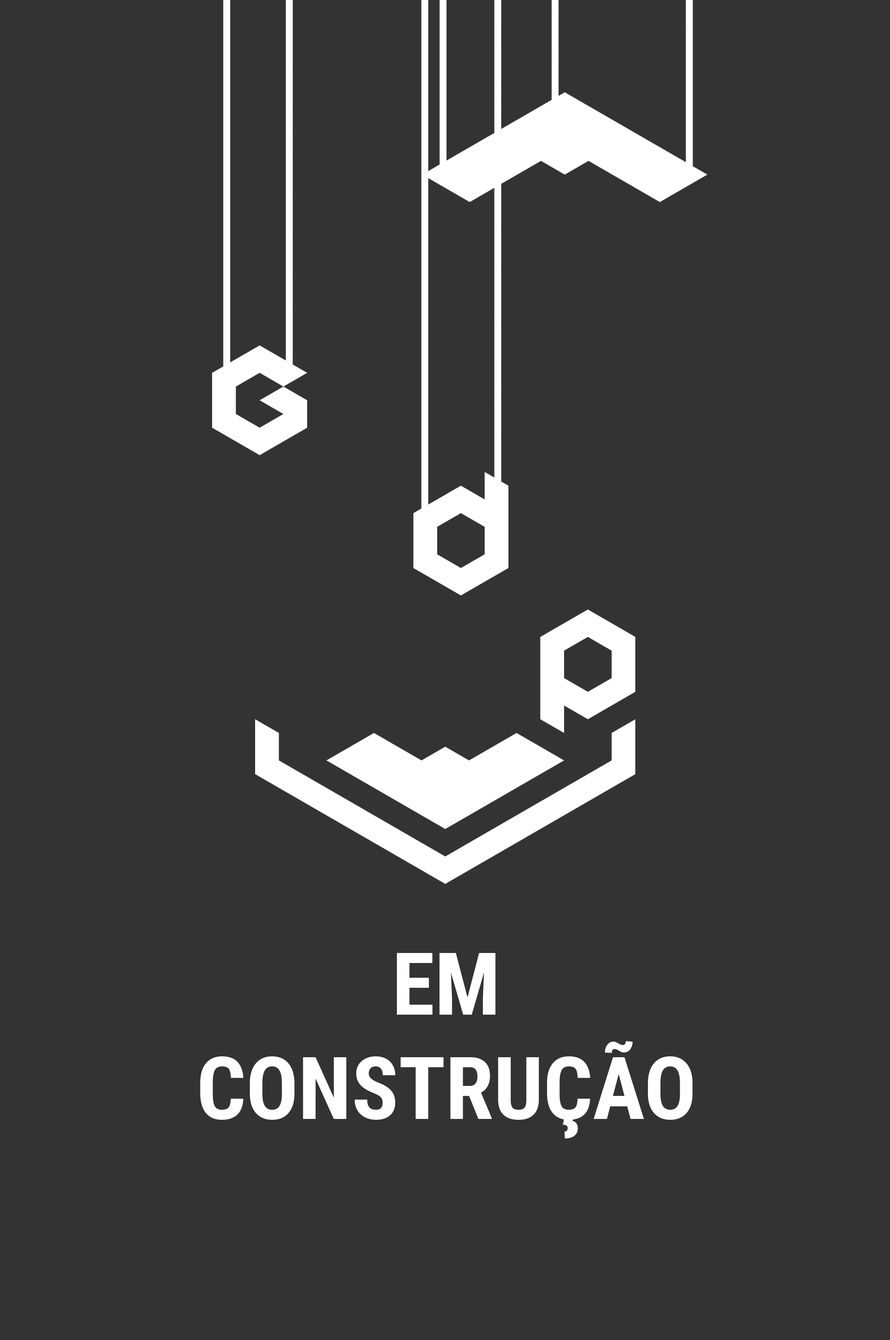
<style>
.page{position:relative;width:890px;height:1340px;background:#333333}
.page>*{position:absolute;margin:0}
.t1{font:86.9px "RobotoCondensed-Bold";color:#ffffff}
</style>
<div class="page">
<p class="t1" style="left:200px;top:953px;width:492px;height:186px;text-align:center">EM CONSTRUÇÃO</p>
</div>
